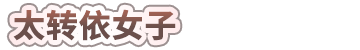
<style>
.page{position:relative;width:360px;height:50px;background:#ffffff}
.page>*{position:absolute;margin:0}
.t1{font:32px "SourceHanSansSC-Bold";color:#73534d;font-weight:bold}
</style>
<div class="page">
<p class="t1" style="left:13px;top:9px;width:163px;height:32px">太转依女子</p>
</div>
